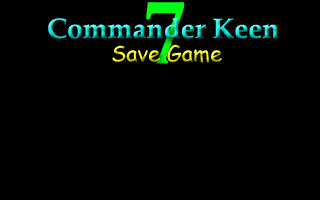
<style>
.page{position:relative;width:320px;height:200px;background:#000000}
.page>*{position:absolute;margin:0}
.t1{font:96px "Garamond-Bold";color:#00ff12}
.t2{font:28px "PalatinoLinotype-Bold"}
.t3{font:22px "ComicSansMS"}
</style>
<div class="page">
<p class="t1" style="left:146px;top:2px;width:39px;height:62px">7</p>
<p class="t2" style="left:48px;top:17px;width:231px;height:22px">Commander Keen</p>
<p class="t3" style="left:112px;top:44px;width:110px;height:19px">Save Game</p>
</div>
